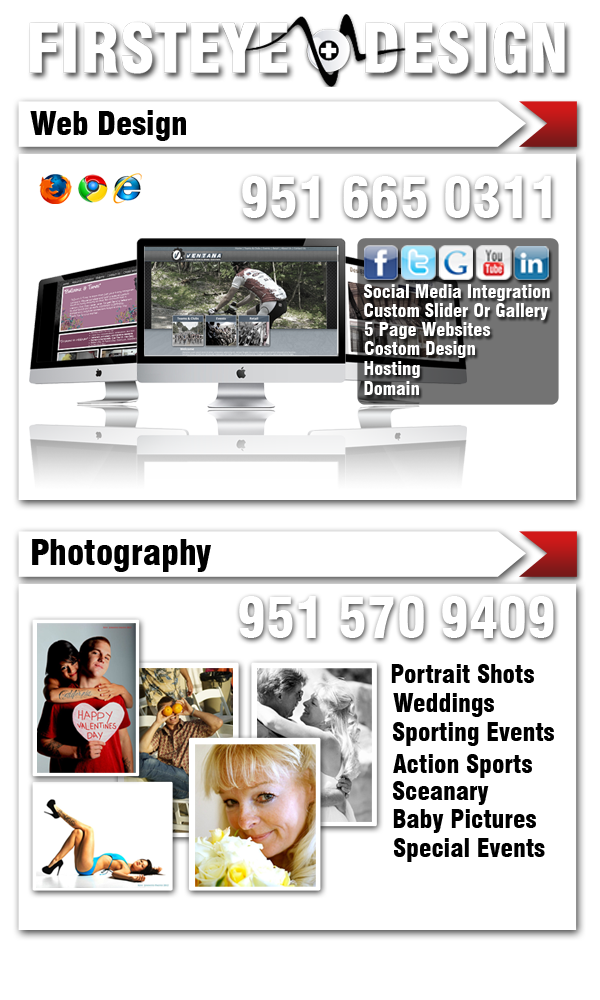
<style>
.page{position:relative;width:600px;height:1000px;background:#ffffff}
.page>*{position:absolute;margin:0}
.t1{font:32.3px "Swiss721BT-BlackCondensed";color:#000000}
.t2{font:54.3px "Swiss721BT-BlackCondensed";color:#ffffff}
.t3{font:18.2px "Swiss721BT-BlackCondensed";color:#ffffff}
.t4{font:34.8px "Swiss721BT-BlackCondensed";color:#000000}
.t5{font:25px "Swiss721BT-BlackCondensed";color:#000000}
</style>
<div class="page">
<p class="t1" style="left:30px;top:110px;width:156px;height:31px">Web Design</p>
<p class="t2" style="left:242px;top:176px;width:309px;height:42px">951 665 0311</p>
<p class="t3" style="left:363px;top:284px;width:187px;height:17px">Social Media Integration</p>
<p class="t3" style="left:364px;top:303px;width:184px;height:17px">Custom Slider Or Gallery</p>
<p class="t3" style="left:364px;top:322px;width:127px;height:17px">5 Page Websites</p>
<p class="t3" style="left:364px;top:341px;width:111px;height:17px">Costom Design</p>
<p class="t3" style="left:364px;top:361px;width:56px;height:17px">Hosting</p>
<p class="t3" style="left:364px;top:381px;width:55px;height:14px">Domain</p>
<p class="t4" style="left:32px;top:539px;width:179px;height:33px">Photography</p>
<p class="t2" style="left:239px;top:596px;width:315px;height:42px">951 570 9409</p>
<p class="t5" style="left:391px;top:664px;width:143px;height:19px">Portrait Shots</p>
<p class="t5" style="left:393px;top:693px;width:101px;height:24px">Weddings</p>
<p class="t5" style="left:392px;top:722px;width:162px;height:24px">Sporting Events</p>
<p class="t5" style="left:393px;top:754px;width:139px;height:24px">Action Sports</p>
<p class="t5" style="left:392px;top:781px;width:97px;height:24px">Sceanary</p>
<p class="t5" style="left:393px;top:809px;width:143px;height:24px">Baby Pictures</p>
<p class="t5" style="left:393px;top:838px;width:152px;height:24px">Special Events</p>
</div>
